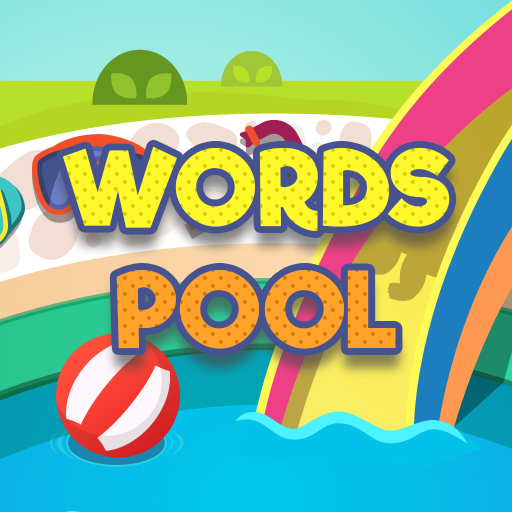
<style>
.page{position:relative;width:512px;height:512px}
.page>*{position:absolute;margin:0}
.t1{font:101px "RifficFree-Bold";letter-spacing:0.025em}
</style>
<div class="page">
<p class="t1" style="left:63px;top:146px;width:387px;height:203px;text-align:center">WORDS POOL</p>
</div>
